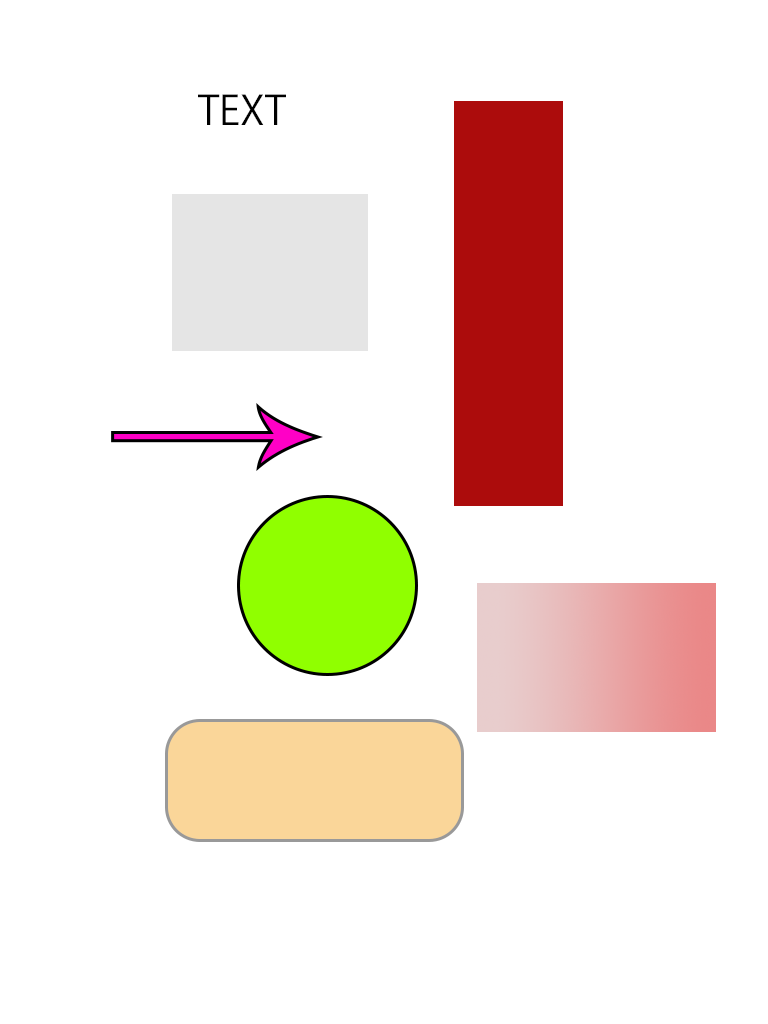
<style>
.page{position:relative;width:768px;height:1024px;background:#ffffff}
.page>*{position:absolute;margin:0}
.t1{font:40px "KozGoPr6N-Regular";color:#000000}
</style>
<div class="page">
<p class="t1" style="left:198px;top:94px;width:88px;height:31px">TEXT</p>
</div>
